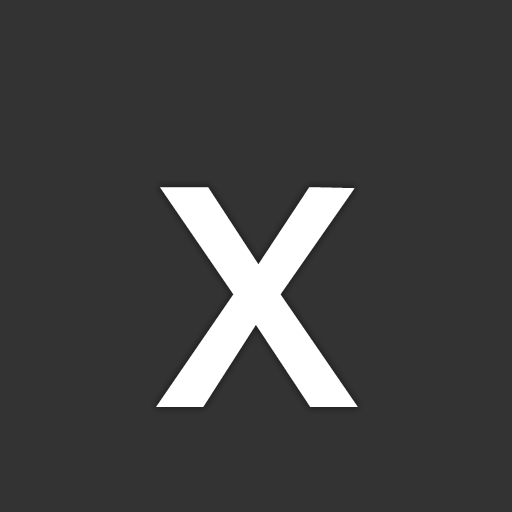
<style>
.page{position:relative;width:512px;height:512px;background:#333333}
.page>*{position:absolute;margin:0}
.t1{font:420px "Helvetica";color:#ffffff}
</style>
<div class="page">
<p class="t1" style="left:156px;top:187px;width:202px;height:220px">x</p>
</div>
